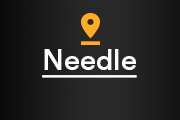
<style>
.page{position:relative;width:180px;height:120px}
.page>*{position:absolute;margin:0}
.t1{font:28.8px "CircularStd-Medium";color:#ffffff;text-decoration:underline}
</style>
<div class="page">
<p class="t1" style="left:42px;top:49px;width:95px;height:29px">Needle</p>
</div>
